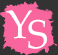
<style>
.page{position:relative;width:58px;height:55px;background:#f9659d}
.page>*{position:absolute;margin:0}
.t1{font:40px "PalatinoLinotype-Roman";letter-spacing:0.24em;color:#fffefe}
.t2{font:40px "PalatinoLinotype-Roman";letter-spacing:0.24em;color:#ffffff}
</style>
<div class="page">
<p class="t1" style="left:6px;top:10px;width:26px;height:29px">Y</p>
<p class="t2" style="left:28px;top:19px;width:19px;height:30px">S</p>
</div>
